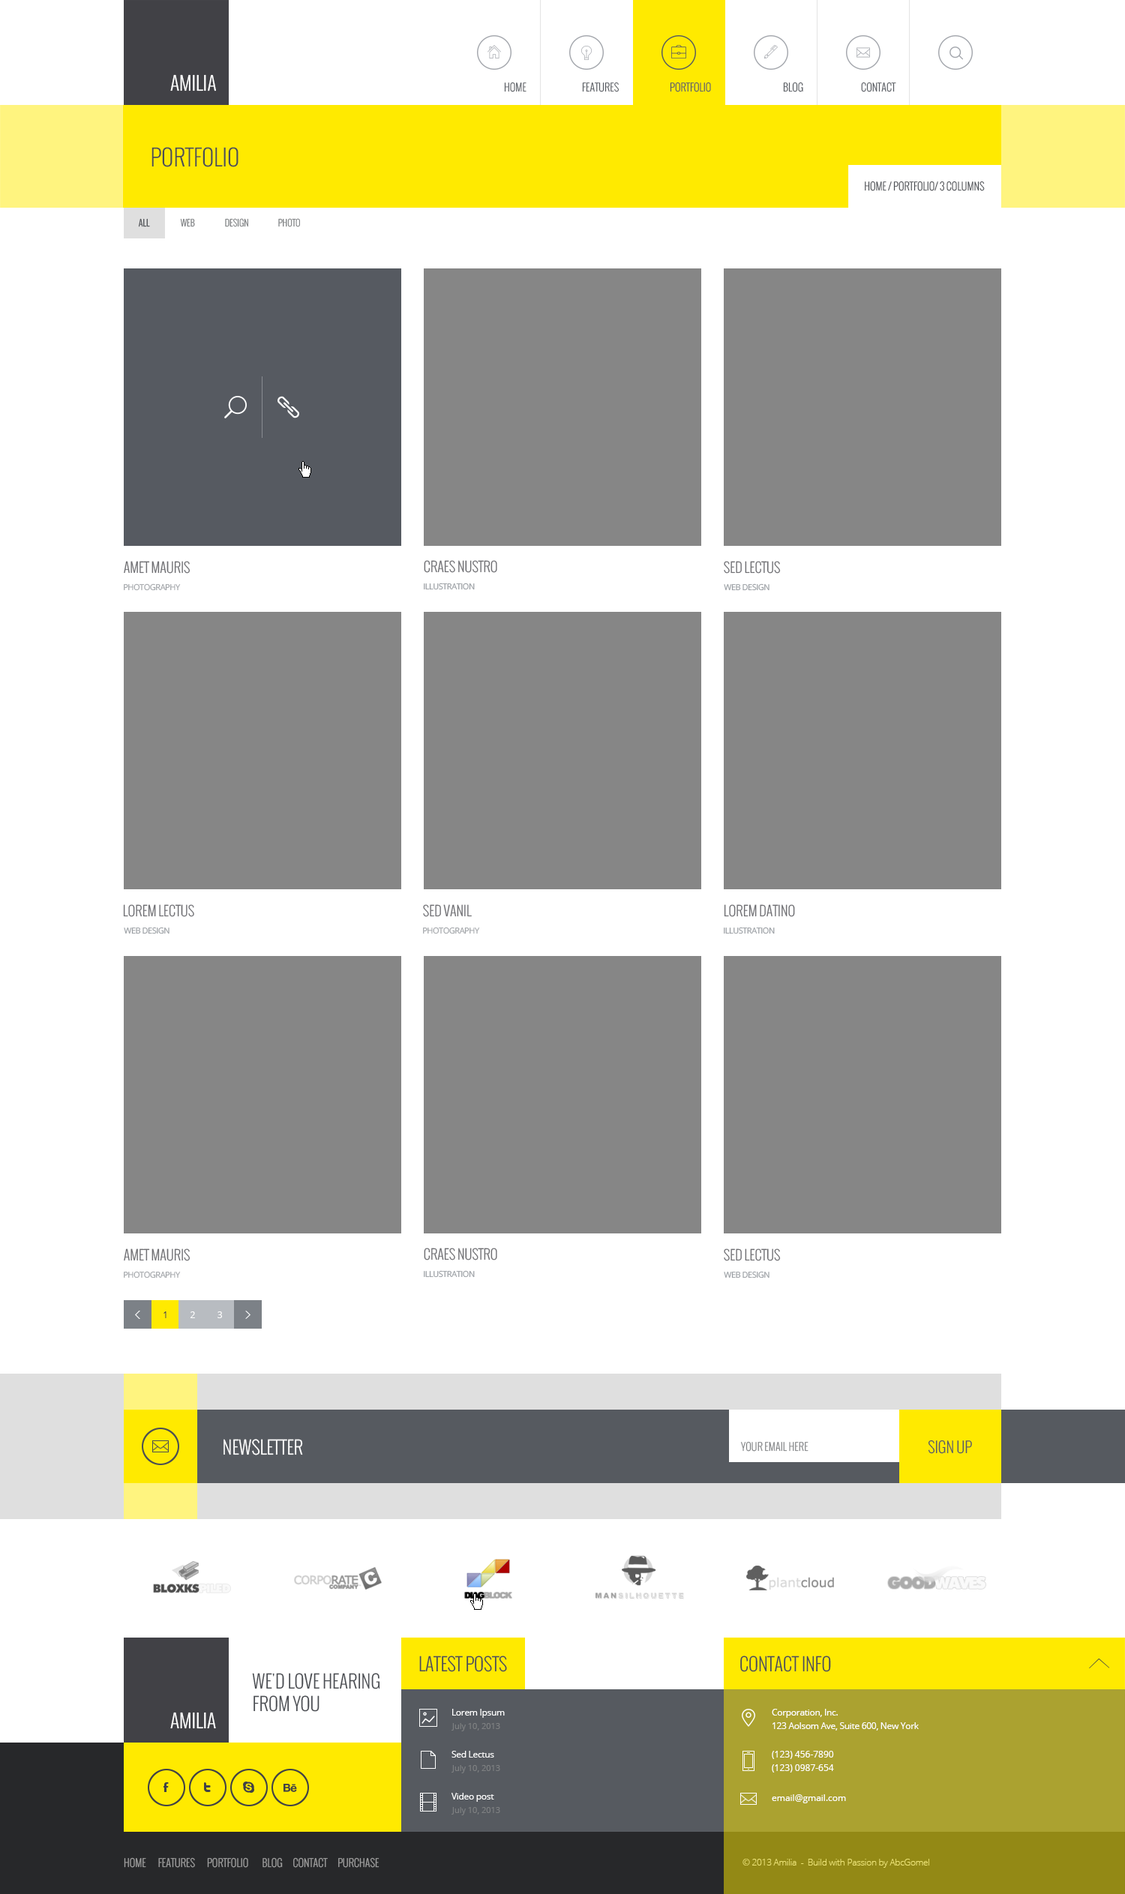
<style>
.page{position:relative;width:1125px;height:1894px;background:#ffffff}
.page>*{position:absolute;margin:0}
.t1{font:18.7px "Oswald-Light";color:#ffffff;text-transform:uppercase}
.t2{font:10.5px "Oswald-Light";color:#565a60;text-transform:uppercase}
.t3{font:22.5px "Oswald-Light";color:#4b4e53;text-transform:uppercase}
.t4{font:10.5px "Oswald-Light";color:#4b4e53;text-transform:uppercase}
.t5{font:9px "Oswald-Light";color:#4b4e53;text-transform:uppercase}
.t6{font:9px "Oswald-Light";color:#7e8082;text-transform:uppercase}
.t7{font:13.5px "Oswald-Light";color:#6f6f73;text-transform:uppercase}
.t8{font:8.2px "OpenSans";letter-spacing:-0.05em;color:#9fa2a6;text-transform:uppercase}
.t9{font:8.2px "OpenSans";letter-spacing:-0.05em;color:#979ca1;text-transform:uppercase}
.t10{font:9px "OpenSans";color:#414146}
.t11{font:9px "OpenSans";color:#ffffff}
.t12{font:18px "Oswald-Light";color:#ffffff}
.t13{font:10.5px "Oswald-Light";letter-spacing:0.005em;color:#7e8082;text-transform:uppercase}
.t14{font:15px "Oswald-Light";color:#565a60}
.t15{font:18px "Oswald-Light";color:#4b4e53}
.t16{font:18px/22.5px "Oswald-Light";color:#4b4e53;text-transform:uppercase}
.t17{font:9px/13.5px "OpenSans";letter-spacing:-0.025em;color:#ffffff}
.t18{font:8.2px "OpenSans";color:#7e8082}
.t19{font:9px "OpenSans";letter-spacing:-0.025em;color:#ffffff}
.t20{font:9px/13.5px "OpenSans";color:#ffffff}
.t21{font:10.5px "Oswald-Light";color:#a1a1a1}
.t22{font:9px "OpenSans-Light";letter-spacing:-0.025em;color:#eee575}
</style>
<div class="page">
<p class="t1" style="left:170px;top:74px;width:46px;height:18px">AMILIA</p>
<p class="t2" style="left:504px;top:82px;width:22px;height:10px">Home</p>
<p class="t2" style="left:582px;top:82px;width:38px;height:10px">features</p>
<p class="t2" style="left:670px;top:82px;width:41px;height:10px">PORTFOLIO</p>
<p class="t2" style="left:783px;top:82px;width:20px;height:10px">BLOG</p>
<p class="t2" style="left:861px;top:82px;width:35px;height:10px">CONTACT</p>
<p class="t3" style="left:152px;top:147px;width:86px;height:20px">PorTFOLIO</p>
<p class="t4" style="left:865px;top:181px;width:120px;height:10px">home / portfolio/ 3 columns</p>
<p class="t5" style="left:138px;top:218px;width:12px;height:9px">All</p>
<p class="t6" style="left:180px;top:218px;width:15px;height:9px">Web</p>
<p class="t6" style="left:225px;top:218px;width:23px;height:9px">Design</p>
<p class="t6" style="left:278px;top:218px;width:22px;height:9px">Photo</p>
<p class="t7" style="left:124px;top:561px;width:66px;height:13px">Amet Mauris</p>
<p class="t7" style="left:424px;top:560px;width:73px;height:13px">Craes Nustro</p>
<p class="t7" style="left:724px;top:561px;width:57px;height:13px">Sed Lectus</p>
<p class="t8" style="left:124px;top:584px;width:57px;height:7px">photography</p>
<p class="t9" style="left:424px;top:583px;width:51px;height:7px"><span class="t8"><br></span>illustration</p>
<p class="t9" style="left:724px;top:584px;width:46px;height:7px"><span class="t8"><br></span>web design</p>
<p class="t7" style="left:123px;top:904px;width:71px;height:13px">Lorem Lectus</p>
<p class="t7" style="left:423px;top:904px;width:49px;height:13px">SeD VaNiL</p>
<p class="t7" style="left:724px;top:904px;width:71px;height:13px">LOREM DAtINo</p>
<p class="t9" style="left:124px;top:927px;width:46px;height:7px"><span class="t8"><br></span>web design</p>
<p class="t8" style="left:423px;top:927px;width:57px;height:7px">photography</p>
<p class="t9" style="left:724px;top:927px;width:51px;height:7px"><span class="t8"><br></span>illustration</p>
<p class="t7" style="left:124px;top:1249px;width:66px;height:13px">Amet Mauris</p>
<p class="t7" style="left:424px;top:1248px;width:73px;height:13px">Craes Nustro</p>
<p class="t7" style="left:724px;top:1249px;width:57px;height:13px">Sed Lectus</p>
<p class="t8" style="left:124px;top:1271px;width:57px;height:8px">photography</p>
<p class="t9" style="left:424px;top:1270px;width:51px;height:8px"><span class="t8"><br></span>illustration</p>
<p class="t9" style="left:724px;top:1271px;width:46px;height:8px"><span class="t8"><br></span>web design</p>
<p class="t10" style="left:164px;top:1312px;width:2px;height:6px">1</p>
<p class="t11" style="left:190px;top:1312px;width:5px;height:6px">2</p>
<p class="t11" style="left:218px;top:1312px;width:4px;height:6px">3</p>
<p class="t12" style="left:224px;top:1439px;width:79px;height:17px">NEWSLETTER</p>
<p class="t13" style="left:740px;top:1442px;width:68px;height:10px">Your email here</p>
<p class="t14" style="left:928px;top:1440px;width:44px;height:14px">SIGN UP</p>
<p class="t15" style="left:419px;top:1656px;width:88px;height:16px">LATEST POSTS</p>
<p class="t15" style="left:740px;top:1656px;width:91px;height:16px">CONTACT INFO</p>
<p class="t16" style="left:252px;top:1673px;width:128px;height:39px">we'd love hearing <br>from you</p>
<p class="t17" style="left:452px;top:1709px;width:53px;height:9px">Lorem Ipsum<br>ipsumage post</p>
<p class="t17" style="left:772px;top:1709px;width:147px;height:22px">Corporation, Inc.<br>123 Aolsom Ave, Suite 600, New York</p>
<p class="t1" style="left:170px;top:1712px;width:46px;height:18px">AMILIA</p>
<p class="t18" style="left:452px;top:1724px;width:48px;height:8px">July 10, 2013</p>
<p class="t19" style="left:452px;top:1751px;width:42px;height:7px">Sed Lectus</p>
<p class="t20" style="left:772px;top:1751px;width:62px;height:22px">(123) 456-7890<br>(123) 0987-654</p>
<p class="t18" style="left:452px;top:1766px;width:48px;height:8px">July 10, 2013</p>
<p class="t19" style="left:452px;top:1793px;width:42px;height:9px">Video post</p>
<p class="t11" style="left:772px;top:1795px;width:74px;height:9px">email@gmail.com</p>
<p class="t18" style="left:452px;top:1808px;width:48px;height:8px">July 10, 2013</p>
<p class="t21" style="left:124px;top:1858px;width:256px;height:10px">HOME       FEATURES       PORTFOLIO        BLOG      CONTACT      PURCHASE</p>
<p class="t22" style="left:742px;top:1859px;width:187px;height:9px">© 2013 Amilia  -  Build with Passion by AbcGomel</p>
</div>
